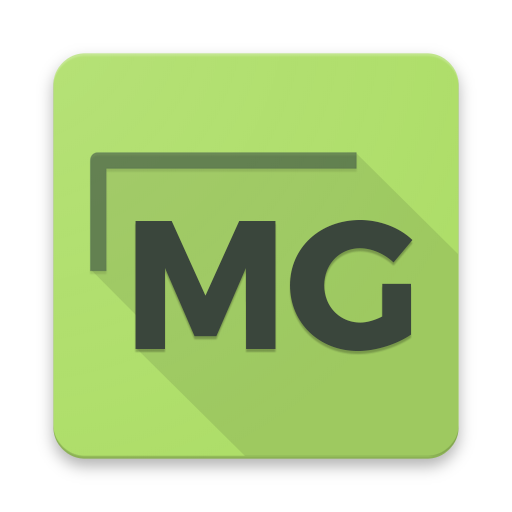
<style>
.page{position:relative;width:512px;height:512px;background:#ffffff}
.page>*{position:absolute;margin:0}
.t1{font:182.1px "Montserrat-Bold";letter-spacing:-0.01em;color:#3f4c41}
</style>
<div class="page">
<p class="t1" style="left:135px;top:220px;width:278px;height:132px">MG</p>
</div>
